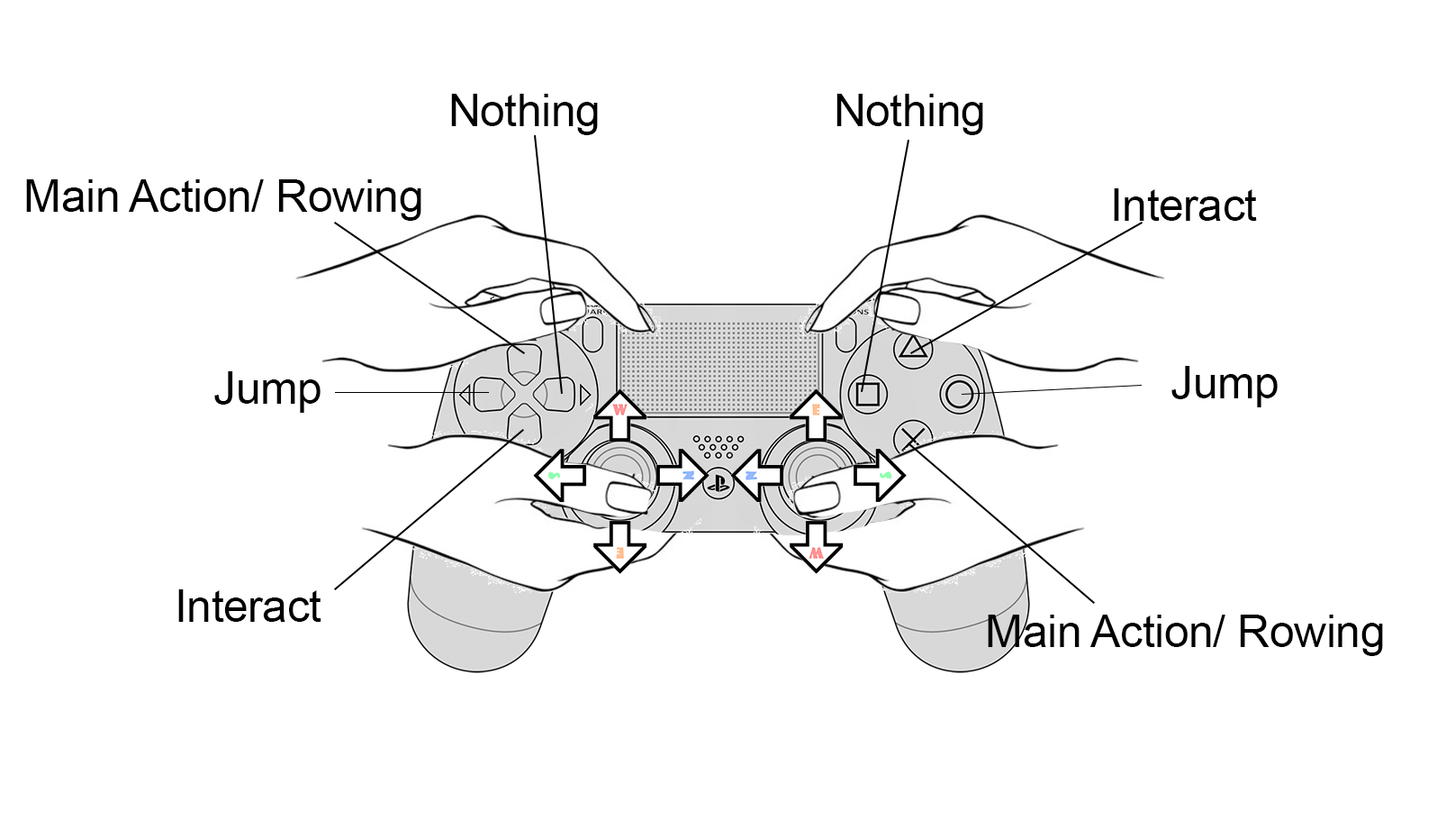
<style>
.page{position:relative;width:1437px;height:830px;background:#ffffff}
.page>*{position:absolute;margin:0}
.t1{font:45px "ArialMT";letter-spacing:-0.01em;color:#000000}
</style>
<div class="page">
<p class="t1" style="left:451px;top:94px;width:147px;height:41px">Nothing</p>
<p class="t1" style="left:837px;top:94px;width:147px;height:41px">Nothing</p>
<p class="t1" style="left:26px;top:179px;width:396px;height:42px">Main Action/ Rowing</p>
<p class="t1" style="left:1114px;top:188px;width:143px;height:33px">Interact</p>
<p class="t1" style="left:1172px;top:366px;width:106px;height:41px">Jump</p>
<p class="t1" style="left:214px;top:371px;width:107px;height:42px">Jump</p>
<p class="t1" style="left:178px;top:589px;width:144px;height:32px">Interact</p>
<p class="t1" style="left:988px;top:614px;width:395px;height:42px">Main Action/ Rowing</p>
</div>
